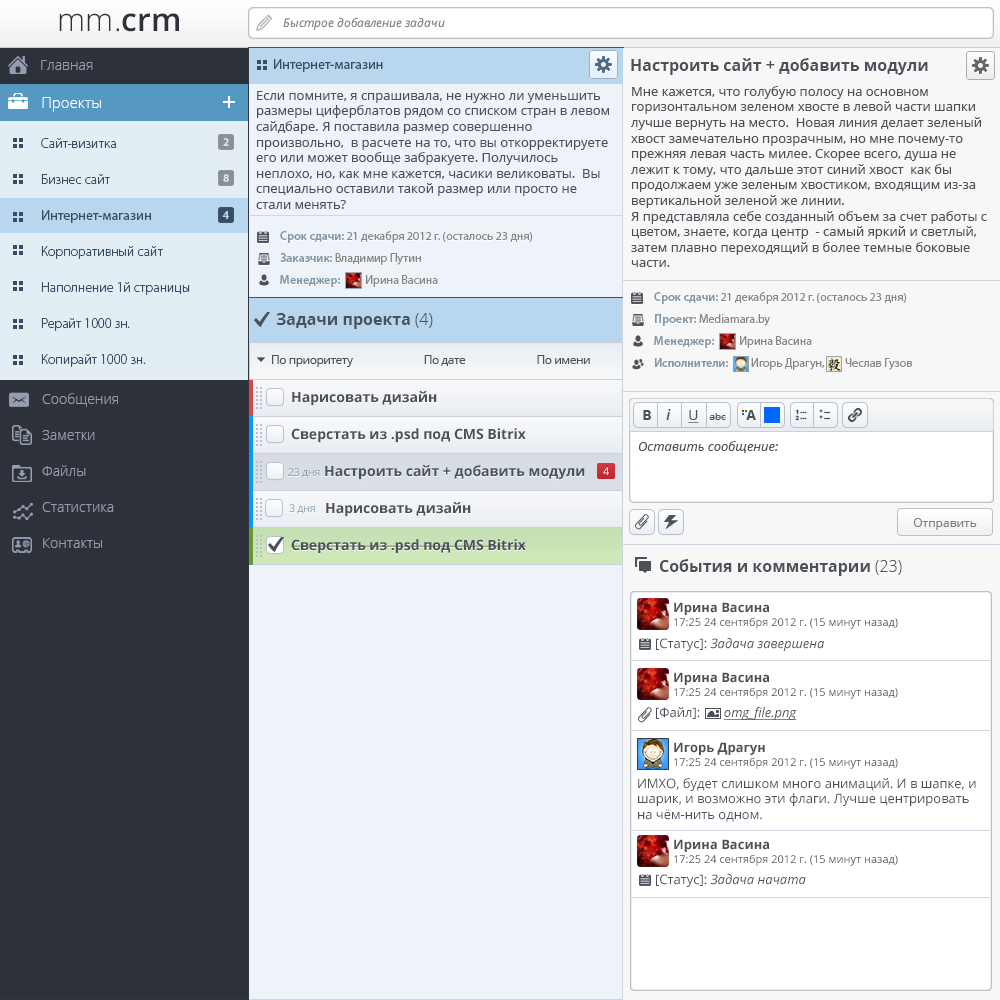
<style>
.page{position:relative;width:1000px;height:1000px;background:#edf3f8}
.page>*{position:absolute;margin:0}
.t1{font:32px "OpenSans-Light";color:#2d313a}
.t2{font:32px "OpenSans-Semibold";color:#2d313a}
.t3{font:12px "OpenSans-Italic";color:#878787}
.t4{font:14px "OpenSans-Light";color:#969db0}
.t5{font:14px "MyriadPro-Regular";color:#374d64}
.t6{font:16px "OpenSans-Bold";color:#4a5158}
.t7{font:13px "OpenSans";color:#4a5158}
.t8{font:15px "OpenSans-Light";color:#ffffff}
.t9{font:23px "MyriadPro-Bold";color:#ffffff}
.t10{font:14px/36px "MyriadPro-Light";color:#374d64}
.t11{font:14px/36px "MyriadPro-Regular";color:#374d64}
.t12{font:11px "OpenSans-Bold";color:#b8d6ee}
.t13{font:12px/22px "MyriadPro-Regular";color:#888888}
.t14{font:12px/22px "MyriadPro-Semibold";color:#8598a8}
.t15{font:16px "OpenSans-Light";color:#4a5158}
.t16{font:12px "OpenSans";letter-spacing:-0.04em;color:#4a5158}
.t17{font:14px/36px "OpenSans-Light";color:#969db0}
.t18{font:14px "OpenSans-Bold";color:#4a5158}
.t19{font:10px "OpenSans";color:#4a5158}
.t20{font:14px "OpenSans-SemiboldItalic";color:#4a5158}
.t21{font:14px "OpenSans";color:#4a5158;text-decoration:underline}
.t22{font:6px/6px "OpenSans-Extrabold";color:#4a5158}
.t23{font:13px "OpenSans-Italic";color:#4a5158}
.t24{font:11px "OpenSans";letter-spacing:-0.04em;color:#8598a8}
.t25{font:11px "OpenSans";color:#ffffff}
.t26{font:12px "OpenSans";color:#7a8085}
.t27{font:13px "OpenSans-Bold";color:#4a5158}
.t28{font:11px "OpenSans";color:#4a5158}
.t29{font:13px "OpenSans-Italic";color:#4a5158;text-decoration:underline}
</style>
<div class="page">
<p class="t1" style="left:59px;top:13px;width:120px;height:19px">mm.<span class="t2">crm</span></p>
<p class="t3" style="left:283px;top:17px;width:162px;height:13px">Быстрое добавление задачи</p>
<p class="t4" style="left:41px;top:60px;width:52px;height:10px">Главная</p>
<p class="t5" style="left:274px;top:59px;width:109px;height:13px">Интернет-магазин</p>
<p class="t6" style="left:631px;top:58px;width:297px;height:17px">Настроить сайт + добавить модули</p>
<p class="t7" style="left:631px;top:86px;width:356px;height:181px">Мне кажется, что голубую полосу на основном горизонтальном зеленом хвосте в левой части шапки  лучше вернуть на место.  Новая линия делает зеленый хвост замечательно прозрачным, но мне почему-то прежняя левая часть милее. Скорее всего, душа не лежит к тому, что дальше этот синий хвост  как бы продолжаем уже зеленым хвостиком, входящим из-за  вертикальной зеленой же линии.<br>Я представляла себе созданный объем за счет работы с цветом, знаете, когда центр  - самый яркий и светлый, затем плавно переходящий в более темные боковые части.<br>И мне кажется или новая шапка стала несколько голубее прежней?  Может быть  впечатление создается за счет  бликования экрана ноутбука.<br>хвост сделать сверху вытянутым лучше убрать телефоны</p>
<p class="t8" style="left:42px;top:97px;width:59px;height:15px">Проекты</p>
<p class="t9" style="left:223px;top:96px;width:12px;height:12px">+</p>
<p class="t7" style="left:256px;top:91px;width:353px;height:118px">Если помните, я спрашивала, не нужно ли уменьшить размеры циферблатов рядом со списком стран в левом сайдбаре. Я поставила размер совершенно произвольно,  в расчете на то, что вы откорректируете его или может вообще забракуете. Получилось неплохо, но, как мне кажется, часики великоваты.  Вы специально оставили такой размер или просто не стали менять?</p>
<p class="t10" style="left:41px;top:138px;width:149px;height:229px">Сайт-визитка<br>Бизнес сайт<br><span class="t11">Интернет-магазин<br></span>Корпоративный сайт<br>Наполнение 1й страницы<br>Рерайт 1000 зн.<br>Копирайт 1000 зн.</p>
<p class="t12" style="left:222px;top:211px;width:7px;height:8px">4</p>
<p class="t13" style="left:280px;top:231px;width:253px;height:56px"><span class="t14">Срок сдачи: </span>21 декабря 2012 г. (осталось 23 дня)<br><span class="t14">Заказчик: </span>Владимир Путин<br><span class="t14">Менеджер:          </span>Ирина Васина</p>
<p class="t13" style="left:654px;top:292px;width:258px;height:78px"><span class="t14">Срок сдачи: </span>21 декабря 2012 г. (осталось 23 дня)<br><span class="t14">Проект: </span>Mediamara.by<br><span class="t14">Менеджер:          </span>Ирина Васина<br><span class="t14">Исполнители:         </span>Игорь Драгун,        Чеслав Гузов</p>
<p class="t6" style="left:276px;top:313px;width:157px;height:16px">Задачи проекта <span class="t15">(4)</span></p>
<p class="t16" style="left:272px;top:355px;width:318px;height:12px">По приоритету                           По дате                           По имени</p>
<p class="t17" style="left:42px;top:393px;width:76px;height:155px">Сообщения<br>Заметки<br>Файлы<br>Статистика<br>Контакты</p>
<p class="t18" style="left:292px;top:391px;width:145px;height:15px">Нарисовать дизайн</p>
<p class="t19" style="left:643px;top:409px;width:83px;height:14px"><span class="t18">B    </span><span class="t20">i     </span><span class="t21">U   </span>abc</p>
<p class="t18" style="left:746px;top:410px;width:10px;height:10px">A</p>
<p class="t22" style="left:795px;top:409px;width:12px;height:12px">1 ---<br>2 ---</p>
<p class="t22" style="left:819px;top:409px;width:12px;height:11px">* ---<br>* ---</p>
<p class="t18" style="left:291px;top:428px;width:235px;height:15px">Сверстать из .psd под CMS Bitrix</p>
<p class="t23" style="left:638px;top:441px;width:140px;height:12px">Оставить сообщение:</p>
<p class="t24" style="left:288px;top:468px;width:32px;height:10px">23 дня</p>
<p class="t18" style="left:325px;top:465px;width:260px;height:15px">Настроить сайт + добавить модули</p>
<p class="t25" style="left:603px;top:467px;width:6px;height:8px">4</p>
<p class="t24" style="left:289px;top:504px;width:26px;height:10px">3 дня</p>
<p class="t18" style="left:326px;top:502px;width:145px;height:15px">Нарисовать дизайн</p>
<p class="t26" style="left:913px;top:518px;width:64px;height:12px">Отправить</p>
<p class="t18" style="left:291px;top:539px;width:235px;height:15px">Сверстать из .psd под CMS Bitrix</p>
<p class="t6" style="left:660px;top:559px;width:242px;height:17px">События и комментарии <span class="t15">(23)</span></p>
<p class="t27" style="left:674px;top:602px;width:95px;height:13px">Ирина Васина</p>
<p class="t28" style="left:674px;top:617px;width:224px;height:12px">17:25 24 сентября 2012 г. (15 минут назад)</p>
<p class="t23" style="left:656px;top:638px;width:168px;height:13px"><span class="t7">[Статус]:</span> Задача завершена</p>
<p class="t27" style="left:674px;top:672px;width:95px;height:13px">Ирина Васина</p>
<p class="t28" style="left:674px;top:687px;width:224px;height:12px">17:25 24 сентября 2012 г. (15 минут назад)</p>
<p class="t29" style="left:656px;top:707px;width:141px;height:13px"><span class="t7">[Файл]:       </span>omg_file.png</p>
<p class="t27" style="left:674px;top:742px;width:91px;height:13px">Игорь Драгун</p>
<p class="t28" style="left:674px;top:757px;width:224px;height:12px">17:25 24 сентября 2012 г. (15 минут назад)</p>
<p class="t7" style="left:638px;top:778px;width:338px;height:44px">ИМХО, будет слишком много анимаций. И в шапке, и шарик, и возможно эти флаги. Лучше центрировать на чём-нить одном.</p>
<p class="t27" style="left:674px;top:839px;width:95px;height:13px">Ирина Васина</p>
<p class="t28" style="left:674px;top:854px;width:224px;height:12px">17:25 24 сентября 2012 г. (15 минут назад)</p>
<p class="t23" style="left:656px;top:874px;width:150px;height:13px"><span class="t7">[Статус]:</span> Задача начата</p>
</div>
